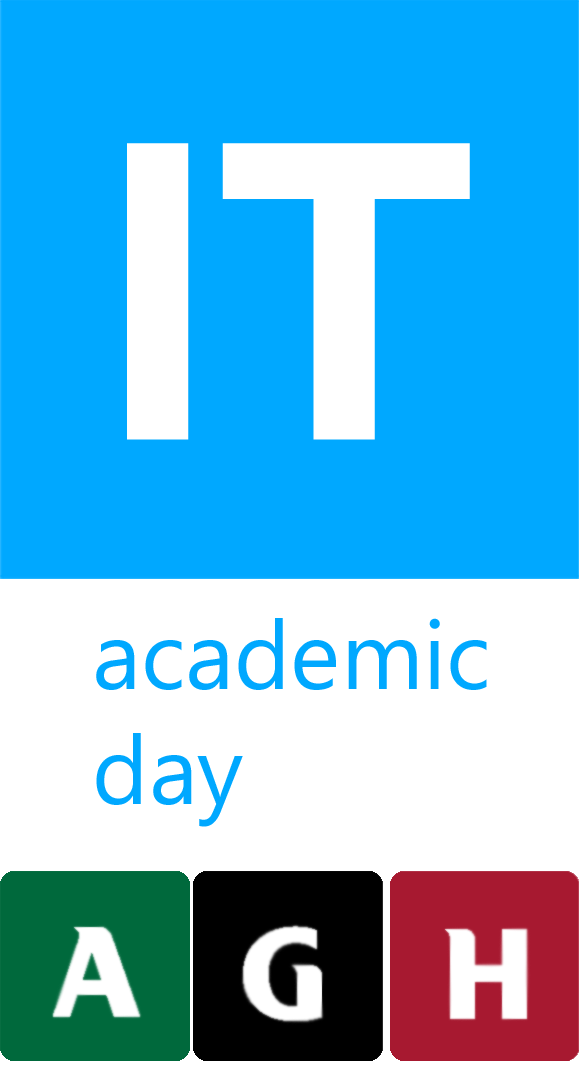
<style>
.page{position:relative;width:579px;height:1065px;background:#00a8ff}
.page>*{position:absolute;margin:0}
.t1{font:399.1px "TrebuchetMS-Bold";color:#ffffff;font-weight:bold}
.t2{font:95.8px "Ebrima";color:#00a8ff}
</style>
<div class="page">
<p class="t1" style="left:127px;top:143px;width:343px;height:297px">IT</p>
<p class="t2" style="left:96px;top:618px;width:391px;height:209px">academic day</p>
</div>
